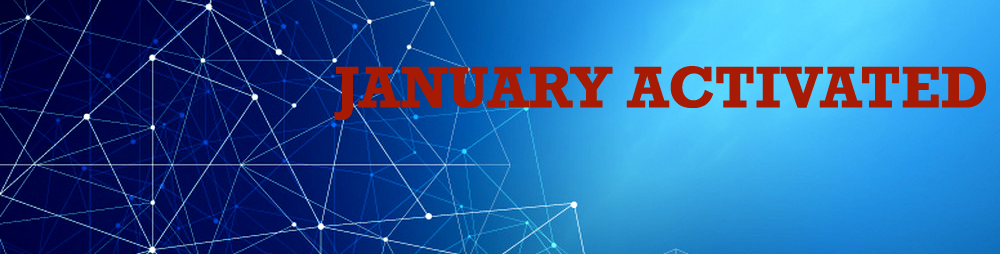
<style>
.page{position:relative;width:1000px;height:254px}
.page>*{position:absolute;margin:0}
.t1{font:60px "Rockwell-Bold";color:#a71a03}
</style>
<div class="page">
<p class="t1" style="left:334px;top:66px;width:652px;height:55px">JANUARY ACTIVATED</p>
</div>
